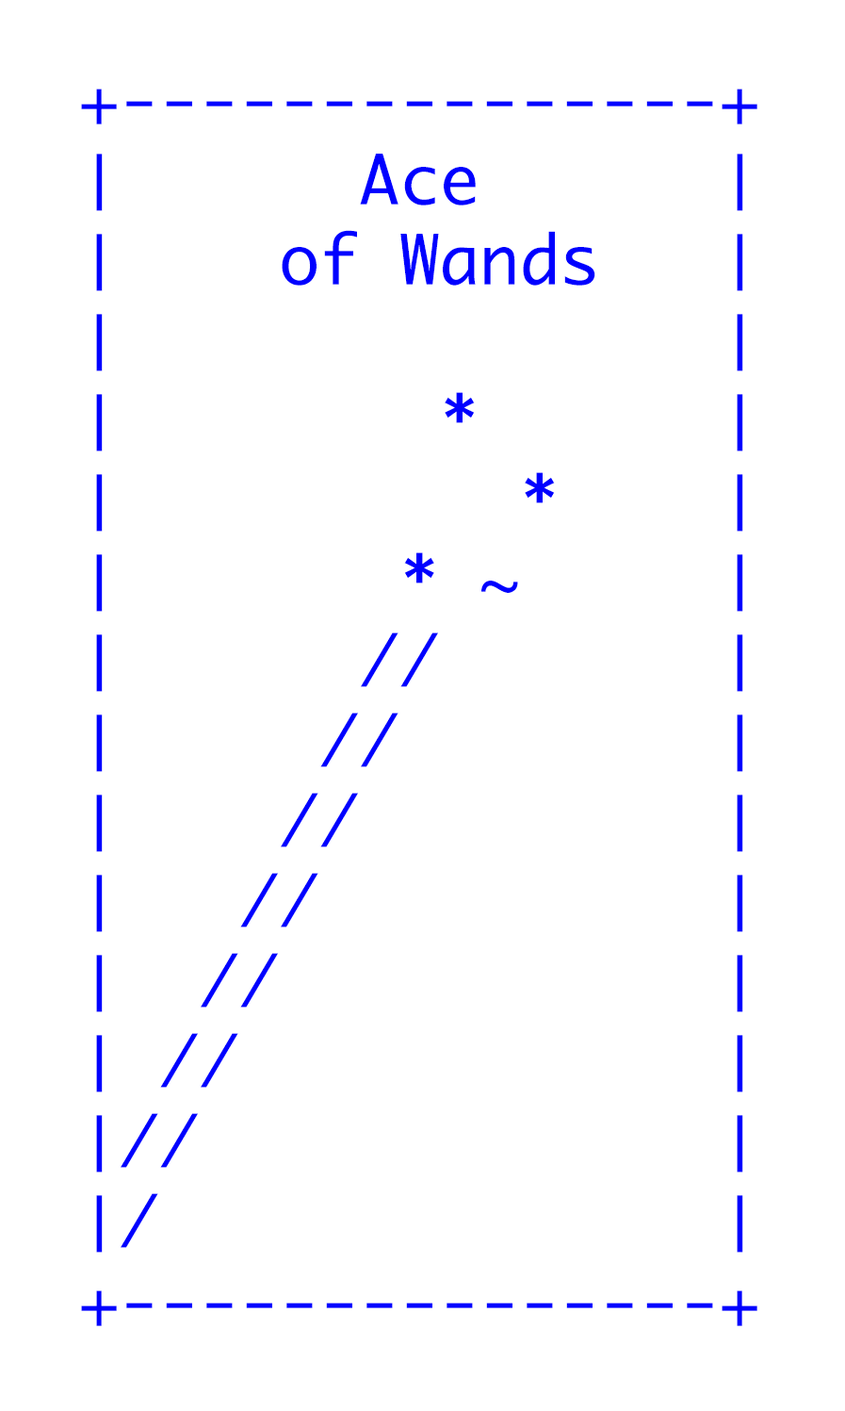
<style>
.page{position:relative;width:845px;height:1411px;background:#ffffff}
.page>*{position:absolute;margin:0}
.t1{font:66.7px "Monaco";color:#0000ff}
</style>
<div class="page">
<p class="t1" style="left:81px;top:89px;width:677px;height:1237px">+---------------+<br>│      Ace      │<br>│    of Wands   │<br>│               │<br>│        *      │<br>│          *    │<br>│       * ~     │<br>│      //       │ <br>│     //        │ <br>│    //         │<br>│   //          │ <br>│  //           │ <br>│ //            │<br>│//             │<br>│/              │<br>+---------------+</p>
</div>
